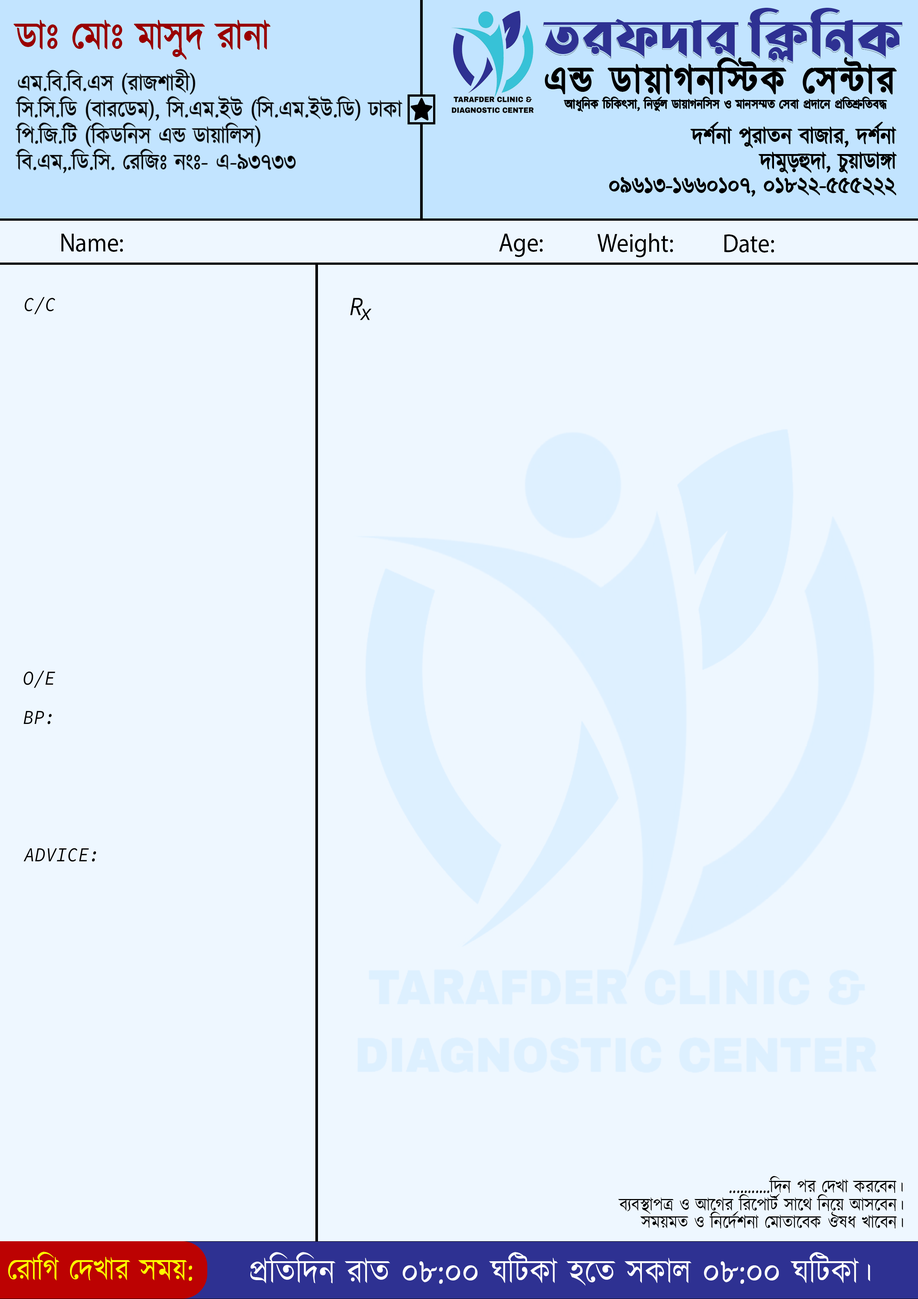
<style>
.page{position:relative;width:918px;height:1299px;background:#eef7ff}
.page>*{position:absolute;margin:0}
.t1{font:53.4px "LiSirajeeSheikhPlainUnicode";color:#2e3192;scale:0.91 1}
.t2{font:39.4px "Kalpurush";color:#9a0000;scale:0.91 1}
.t3{font:39.4px "Kalpurush";letter-spacing:0.06em;color:#000000;scale:0.91 1}
.t4{font:23px/26.3px "Kalpurush";color:#000000;scale:0.91 1}
.t5{font:13.1px "Kalpurush";color:#000000;scale:0.91 1}
.t6{font:23px "Kalpurush";color:#000000;scale:0.91 1}
.t7{font:26.3px "MyriadPro-Regular";color:#000000;scale:0.91 1}
.t8{font:19.7px "SourceCodePro-Regular";color:#000000;scale:0.91 1}
.t9{font:26.3px "SourceCodePro-Regular";color:#000000;scale:0.91 1}
.t10{font:23px "SourceCodePro-Regular";color:#000000;scale:0.91 1}
.t11{font:18.1px "Kalpurush";color:#000000;scale:0.91 1}
.t12{font:31.2px "Kalpurush";color:#fcff00;scale:0.91 1}
.t13{font:34.2px "Kalpurush";color:#ffffff;scale:0.91 1}
</style>
<div class="page">
<p class="t1" style="left:543px;top:8px;width:360px;height:54px">তরফদার ক্লিনিক</p>
<p class="t2" style="left:14px;top:20px;width:256px;height:40px">ডাঃ মোঃ মাসুদ রানা</p>
<p class="t3" style="left:545px;top:58px;width:351px;height:36px">এন্ড ডায়াগনস্টিক সেন্টার</p>
<p class="t4" style="left:15px;top:69px;width:387px;height:104px">এম.বি.বি.এস (রাজশাহী)<br>সি.সি.ডি (বারডেম), সি.এম.ইউ (সি.এম.ইউ.ডি) ঢাকা<br>পি.জি.টি (কিডনিস এন্ড ডায়ালিস)<br>বি.এম,.ডি.সি. রেজিঃ নংঃ- এ-৯৩৭৩৩</p>
<p class="t5" style="left:564px;top:97px;width:323px;height:15px">আধুনিক চিকিৎসা, নির্ভুল ডায়াগনসিস ও মানসম্মত সেবা প্রদানে প্রতিশ্রুতিবদ্ধ</p>
<p class="t6" style="left:690px;top:122px;width:206px;height:26px">দর্শনা পুরাতন বাজার, দর্শনা</p>
<p class="t6" style="left:759px;top:152px;width:138px;height:22px">দামুড়হুদা, চুয়াডাঙ্গা</p>
<p class="t6" style="left:609px;top:177px;width:287px;height:20px">০৯৬১৩-১৬৬০১০৭, ০১৮২২-৫৫৫২২২</p>
<p class="t7" style="left:61px;top:234px;width:62px;height:18px">Name:</p>
<p class="t7" style="left:499px;top:234px;width:44px;height:23px">Age:</p>
<p class="t7" style="left:598px;top:233px;width:75px;height:24px">Weight:</p>
<p class="t7" style="left:725px;top:234px;width:49px;height:18px">Date:</p>
<p class="t8" style="left:24px;top:297px;width:31px;height:17px">C/C</p>
<p class="t9" style="left:350px;top:298px;width:13px;height:17px">R</p>
<p class="t10" style="left:360px;top:308px;width:12px;height:12px">x</p>
<p class="t8" style="left:24px;top:670px;width:31px;height:18px">O/E</p>
<p class="t8" style="left:24px;top:711px;width:28px;height:13px">BP:</p>
<p class="t8" style="left:23px;top:848px;width:73px;height:14px">ADVICE:</p>
<p class="t11" style="left:729px;top:1176px;width:174px;height:17px">...........দিন পর দেখা করবেন।</p>
<p class="t11" style="left:618px;top:1194px;width:285px;height:20px">ব্যবস্থাপত্র ও আগের রিপোর্ট সাথে নিয়ে আসবেন।</p>
<p class="t11" style="left:640px;top:1211px;width:263px;height:17px">সময়মত ও নির্দেশনা মোতাবেক ঔষধ খাবেন।</p>
<p class="t12" style="left:8px;top:1251px;width:184px;height:30px">রোগি দেখার সময়:</p>
<p class="t13" style="left:250px;top:1252px;width:620px;height:34px">প্রতিদিন রাত ০৮:০০ ঘটিকা হতে সকাল ০৮:০০ ঘটিকা।</p>
</div>
